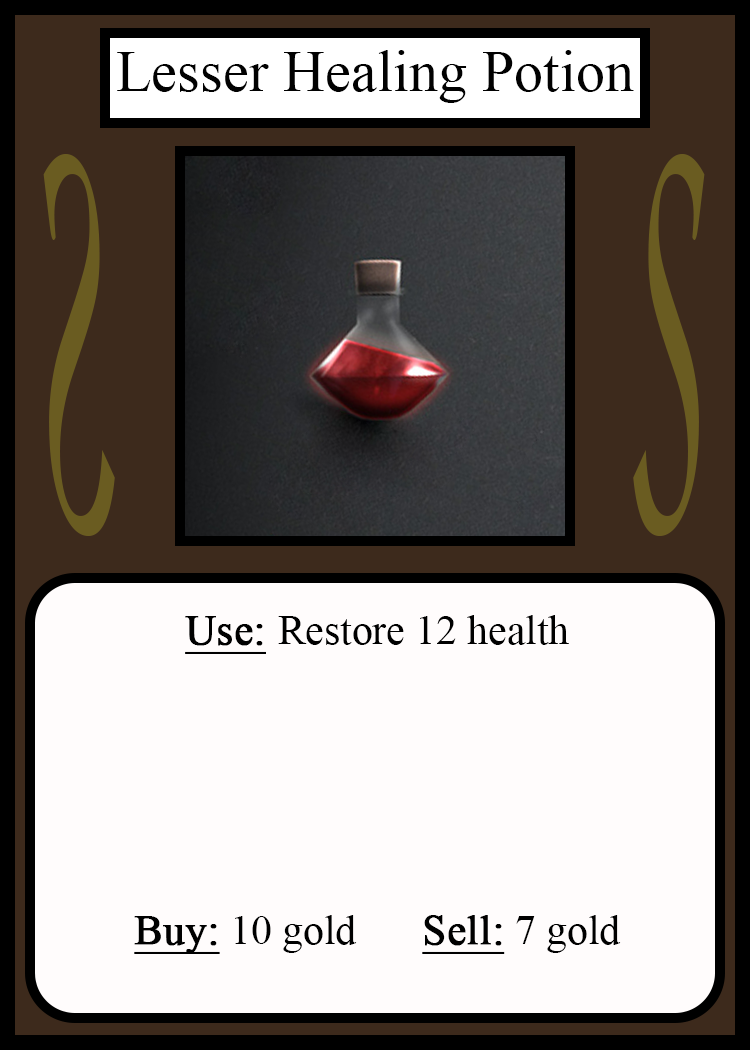
<style>
.page{position:relative;width:750px;height:1050px;background:#fffcfc}
.page>*{position:absolute;margin:0}
.t1{font:58.3px "TimesNewRomanPSMT";color:#010101}
.t2{font:548.5px "Apple-Chancery";color:#6a5c21;scale:0.27 1}
.t3{font:548.2px "Apple-Chancery";color:#6a5c21;scale:0.27 1}
.t4{font:41.7px "TimesNewRomanPSMT";color:#000000}
.t5{font:41.7px "TimesNewRomanPSMT";color:#000000;font-weight:bold;text-decoration:underline}
</style>
<div class="page">
<p class="t1" style="left:117px;top:50px;width:517px;height:53px">Lesser Healing Potion</p>
<p class="t2" style="left:43px;top:154px;width:72px;height:382px;rotate:180deg">S</p>
<p class="t3" style="left:633px;top:154px;width:72px;height:382px">S</p>
<p class="t4" style="left:134px;top:615px;width:487px;height:339px;text-align:center"><span class="t5">Use: </span>Restore 12 health<br><br><br><br><br><br><span class="t5">Buy:</span> 10 gold   <span class="t5">Sell:</span> 7 gold</p>
</div>
